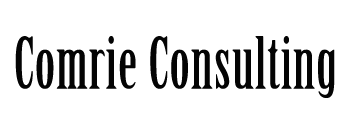
<style>
.page{position:relative;width:350px;height:140px;background:#ffffff}
.page>*{position:absolute;margin:0}
.t1{font:70px "BirchStd";letter-spacing:0.02em;color:#040404}
</style>
<div class="page">
<p class="t1" style="left:15px;top:36px;width:320px;height:62px">Comrie Consulting</p>
</div>
